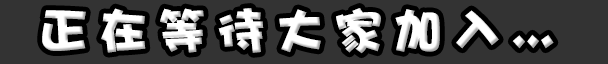
<style>
.page{position:relative;width:608px;height:64px;background:#333333}
.page>*{position:absolute;margin:0}
.t1{font:49px "DFPHaiBaoW12";letter-spacing:0.18em;color:#ffffff}
.t2{font:49px "DFPHaiBaoW12";letter-spacing:0.21em;color:#ffffff}
.t3{font:55px "MarioKartPositionFontRegular";letter-spacing:0.2em;color:#ffffff}
</style>
<div class="page">
<p class="t1" style="left:42px;top:8px;width:512px;height:46px">正在等待大家加<span class="t2">入</span><span class="t3">…</span></p>
</div>
